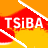
<style>
.page{position:relative;width:48px;height:48px;background:#ff9703}
.page>*{position:absolute;margin:0}
.t1{font:14px "BellGothicStd-Black";color:#ffffff}
</style>
<div class="page">
<p class="t1" style="left:4px;top:17px;width:40px;height:12px">TSiBA</p>
</div>
